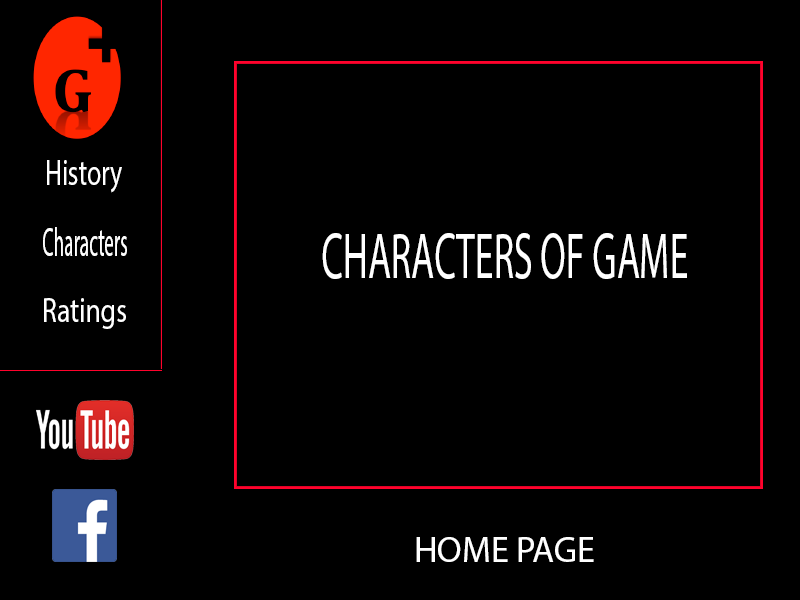
<style>
.page{position:relative;width:800px;height:600px;background:#000000}
.page>*{position:absolute;margin:0}
.t1{font:35.8px "MyriadPro-Regular";color:#ffffff;scale:0.72 1}
.t2{font:40.8px "MyriadPro-Regular";color:#ffffff;scale:0.48 1}
.t3{font:64.6px "MyriadPro-Regular";color:#ffffff;scale:0.58 1}
.t4{font:35px "MyriadPro-Regular";color:#ffffff;scale:0.78 1}
.t5{font:36px "MyriadPro-Regular";color:#ffffff}
</style>
<div class="page">
<p class="t1" style="left:47px;top:160px;width:75px;height:33px">History</p>
<p class="t2" style="left:43px;top:227px;width:84px;height:29px">Characters</p>
<p class="t3" style="left:322px;top:233px;width:365px;height:46px">CHARACTERS OF GAME</p>
<p class="t4" style="left:44px;top:298px;width:82px;height:31px">Ratings</p>
<p class="t5" style="left:416px;top:537px;width:178px;height:25px">HOME PAGE</p>
</div>
